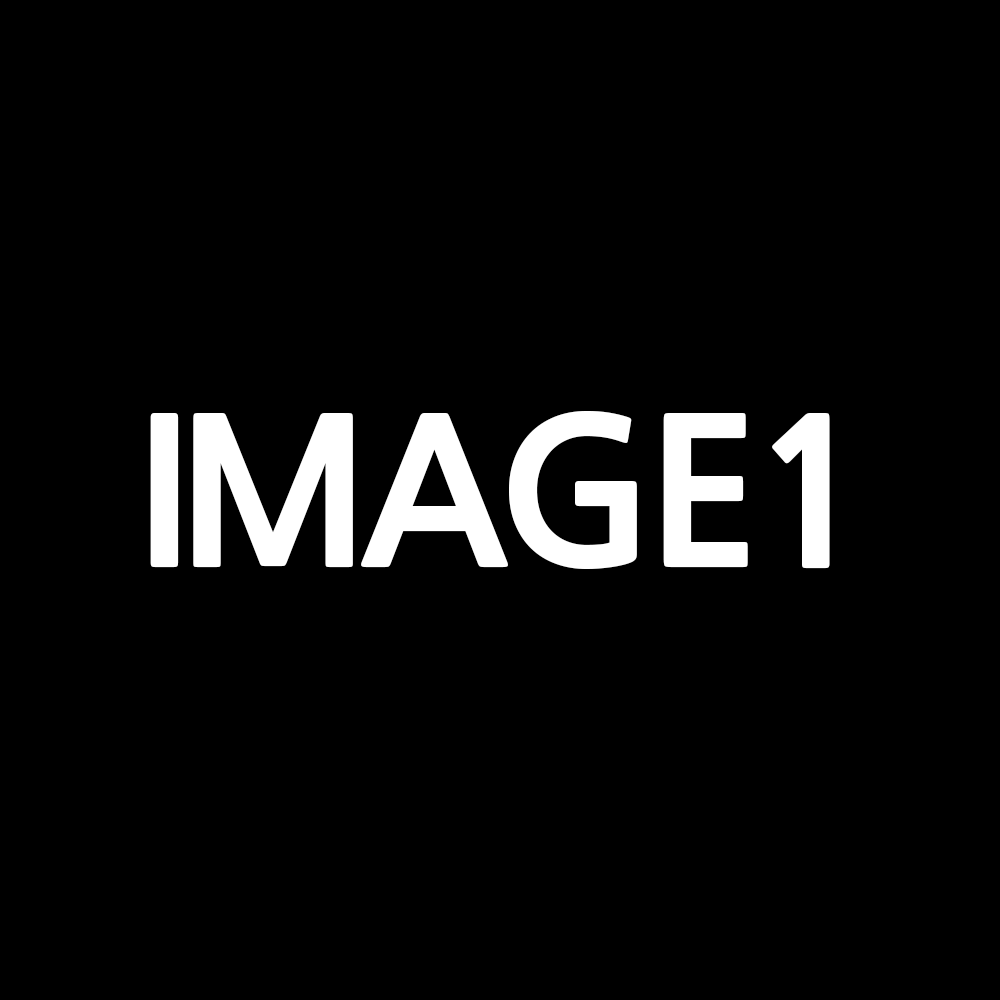
<style>
.page{position:relative;width:1000px;height:1000px;background:#000000}
.page>*{position:absolute;margin:0}
.t1{font:200px "NanumGothicExtraBold";letter-spacing:-0.05em;color:#ffffff;text-transform:uppercase}
</style>
<div class="page">
<p class="t1" style="left:150px;top:411px;width:680px;height:158px">IMAGE1</p>
</div>
